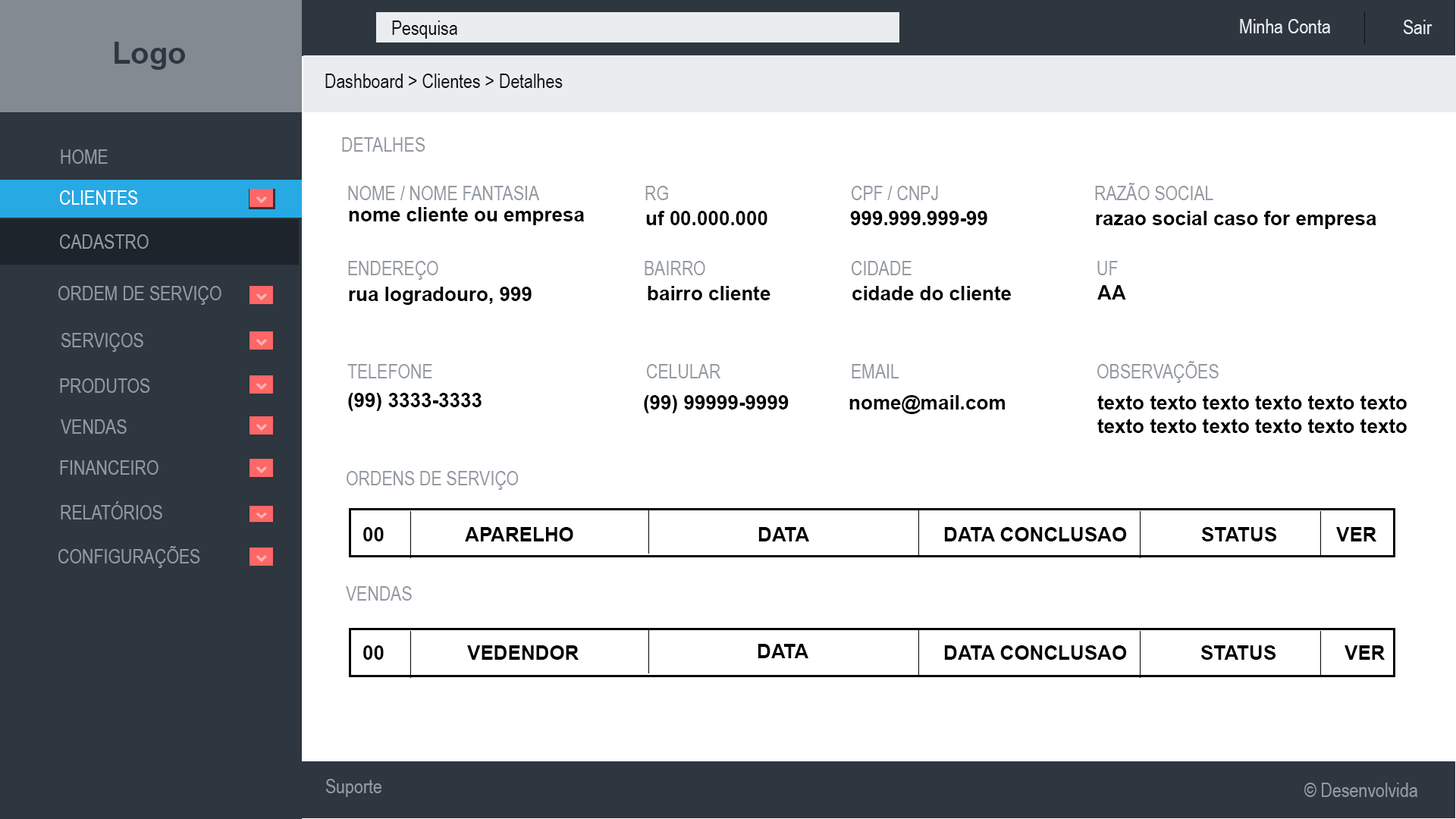
<style>
.page{position:relative;width:1456px;height:819px;background:#ffffff}
.page>*{position:absolute;margin:0}
.t1{font:19.7px "ArialNarrow";color:#0e0f0f}
.t2{font:19.7px "ArialNarrow";color:#eaedf0}
.t3{font:30.3px "Arial-BoldMT";color:#2e363f}
.t4{font:19.7px "ArialNarrow";color:#9399a1}
.t5{font:19.7px "ArialNarrow";color:#ffffff}
.t6{font:19.7px "Arial-BoldMT";color:#000000}
</style>
<div class="page">
<p class="t1" style="left:392px;top:20px;width:65px;height:19px">Pesquisa</p>
<p class="t2" style="left:1240px;top:19px;width:90px;height:14px">Minha Conta</p>
<p class="t2" style="left:1403px;top:20px;width:29px;height:14px">Sair</p>
<p class="t3" style="left:115px;top:42px;width:70px;height:28px">Logo</p>
<p class="t1" style="left:325px;top:74px;width:238px;height:14px">Dashboard &gt; Clientes &gt; Detalhes</p>
<p class="t4" style="left:342px;top:137px;width:83px;height:15px">DETALHES</p>
<p class="t4" style="left:61px;top:149px;width:47px;height:15px">HOME</p>
<p class="t4" style="left:348px;top:186px;width:192px;height:14px">NOME / NOME FANTASIA</p>
<p class="t4" style="left:645px;top:186px;width:23px;height:14px">RG</p>
<p class="t4" style="left:852px;top:186px;width:86px;height:14px">CPF / CNPJ</p>
<p class="t4" style="left:1095px;top:183px;width:118px;height:17px">RAZÃO SOCIAL</p>
<p class="t5" style="left:60px;top:190px;width:78px;height:15px">CLIENTES</p>
<p class="t6" style="left:349px;top:207px;width:236px;height:18px">nome cliente ou empresa</p>
<p class="t6" style="left:646px;top:211px;width:121px;height:14px">uf 00.000.000</p>
<p class="t6" style="left:850px;top:211px;width:137px;height:14px">999.999.999-99</p>
<p class="t6" style="left:1096px;top:211px;width:280px;height:18px">razao social caso for empresa</p>
<p class="t4" style="left:60px;top:234px;width:89px;height:15px">CADASTRO</p>
<p class="t4" style="left:348px;top:261px;width:90px;height:19px">ENDEREÇO</p>
<p class="t4" style="left:645px;top:261px;width:60px;height:14px">BAIRRO</p>
<p class="t4" style="left:852px;top:261px;width:60px;height:14px">CIDADE</p>
<p class="t4" style="left:1097px;top:261px;width:21px;height:14px">UF</p>
<p class="t4" style="left:58px;top:286px;width:163px;height:19px">ORDEM DE SERVIÇO</p>
<p class="t6" style="left:349px;top:287px;width:183px;height:18px">rua logradouro, 999</p>
<p class="t6" style="left:648px;top:286px;width:122px;height:14px">bairro cliente</p>
<p class="t6" style="left:852px;top:286px;width:159px;height:14px">cidade do cliente</p>
<p class="t6" style="left:1097px;top:285px;width:29px;height:15px">AA</p>
<p class="t4" style="left:61px;top:333px;width:82px;height:19px">SERVIÇOS</p>
<p class="t4" style="left:347px;top:364px;width:85px;height:14px">TELEFONE</p>
<p class="t4" style="left:647px;top:364px;width:73px;height:14px">CELULAR</p>
<p class="t4" style="left:852px;top:364px;width:47px;height:14px">EMAIL</p>
<p class="t4" style="left:1097px;top:361px;width:122px;height:22px">OBSERVAÇÕES</p>
<p class="t4" style="left:60px;top:378px;width:90px;height:15px">PRODUTOS</p>
<p class="t6" style="left:348px;top:393px;width:134px;height:18px">(99) 3333-3333</p>
<p class="t6" style="left:644px;top:395px;width:145px;height:18px">(99) 99999-9999</p>
<p class="t6" style="left:849px;top:395px;width:156px;height:19px">nome@mail.com</p>
<p class="t6" style="left:1097px;top:395px;width:310px;height:38px">texto texto texto texto texto texto<br>texto texto texto texto texto texto</p>
<p class="t4" style="left:61px;top:419px;width:66px;height:15px">VENDAS</p>
<p class="t4" style="left:60px;top:460px;width:98px;height:15px">FINANCEIRO</p>
<p class="t4" style="left:347px;top:471px;width:172px;height:19px">ORDENS DE SERVIÇO</p>
<p class="t4" style="left:61px;top:501px;width:101px;height:18px">RELATÓRIOS</p>
<p class="t6" style="left:363px;top:527px;width:21px;height:14px">00</p>
<p class="t6" style="left:465px;top:527px;width:108px;height:14px">APARELHO</p>
<p class="t6" style="left:758px;top:527px;width:51px;height:14px">DATA</p>
<p class="t6" style="left:944px;top:527px;width:183px;height:14px">DATA CONCLUSAO</p>
<p class="t6" style="left:1201px;top:527px;width:75px;height:14px">STATUS</p>
<p class="t6" style="left:1336px;top:527px;width:40px;height:14px">VER</p>
<p class="t4" style="left:58px;top:546px;width:142px;height:22px">CONFIGURAÇÕES</p>
<p class="t4" style="left:346px;top:586px;width:66px;height:15px">VENDAS</p>
<p class="t6" style="left:363px;top:645px;width:21px;height:15px">00</p>
<p class="t6" style="left:467px;top:645px;width:112px;height:15px">VEDENDOR</p>
<p class="t6" style="left:758px;top:644px;width:50px;height:14px">DATA</p>
<p class="t6" style="left:944px;top:645px;width:183px;height:15px">DATA CONCLUSAO</p>
<p class="t6" style="left:1200px;top:645px;width:75px;height:15px">STATUS</p>
<p class="t6" style="left:1345px;top:645px;width:40px;height:15px">VER</p>
<p class="t4" style="left:325px;top:779px;width:56px;height:18px">Suporte</p>
<p class="t4" style="left:1304px;top:783px;width:113px;height:14px">© Desenvolvida</p>
</div>
